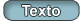
<style>
.page{position:relative;width:83px;height:21px;background:#95beca}
.page>*{position:absolute;margin:0}
.t1{font:15px "Arial-BoldMT";color:#ffffff}
</style>
<div class="page">
<p class="t1" style="left:22px;top:5px;width:38px;height:11px">Texto</p>
</div>
